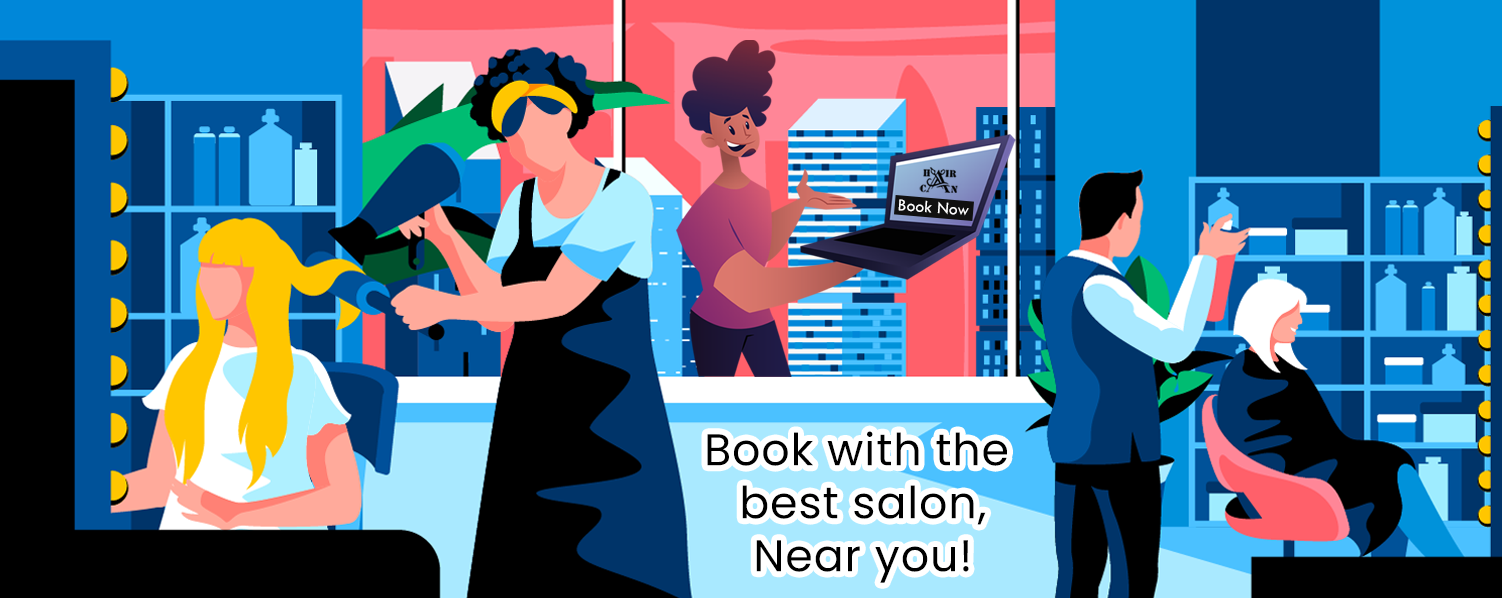
<style>
.page{position:relative;width:1502px;height:598px}
.page>*{position:absolute;margin:0}
.t1{font:17.9px "TwCenMT-Regular";color:#ffffff}
.t2{font:44.4px/53px "Poppins-Regular";letter-spacing:0.02em;color:#000000}
</style>
<div class="page">
<p class="t1" style="left:898px;top:199px;width:71px;height:17px;rotate:4deg">Book Now</p>
<p class="t2" style="left:707px;top:431px;width:300px;height:152px;text-align:center">Book with the <br>best salon,<br>Near you!</p>
</div>
